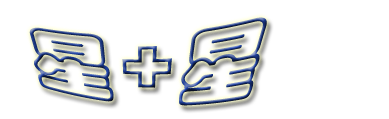
<style>
.page{position:relative;width:389px;height:119px;background:#ffffff}
.page>*{position:absolute;margin:0}
.t1{font:80px "STCaiyun"}
</style>
<div class="page">
<p class="t1" style="left:29px;top:17px;width:238px;height:89px">星+星</p>
</div>
